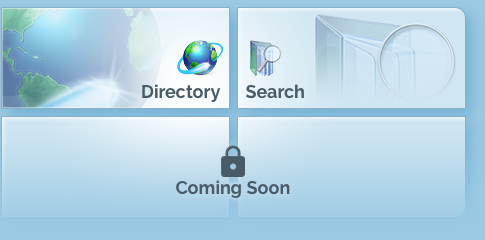
<style>
.page{position:relative;width:485px;height:240px}
.page>*{position:absolute;margin:0}
.t1{font:18px "Raleway-Bold";color:#495b66}
</style>
<div class="page">
<p class="t1" style="left:142px;top:84px;width:79px;height:19px">Directory</p>
<p class="t1" style="left:246px;top:84px;width:58px;height:15px">Search</p>
<p class="t1" style="left:176px;top:180px;width:114px;height:18px">Coming Soon</p>
</div>
